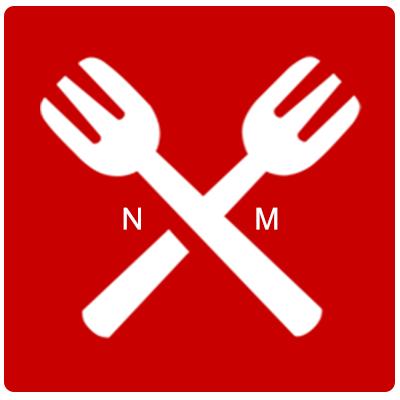
<style>
.page{position:relative;width:400px;height:400px;background:#c80000}
.page>*{position:absolute;margin:0}
.t1{font:30px "ArialMT";color:#ffffff}
</style>
<div class="page">
<p class="t1" style="left:123px;top:207px;width:18px;height:23px">N</p>
<p class="t1" style="left:256px;top:207px;width:22px;height:23px">M</p>
</div>
